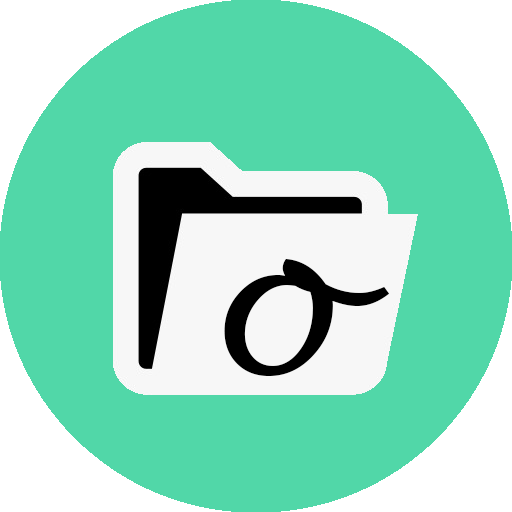
<style>
.page{position:relative;width:512px;height:512px;background:#51d7a8}
.page>*{position:absolute;margin:0}
.t1{font:200px "LucidaHandwriting-Italic";color:#000000}
</style>
<div class="page">
<p class="t1" style="left:224px;top:259px;width:166px;height:117px">o</p>
</div>
